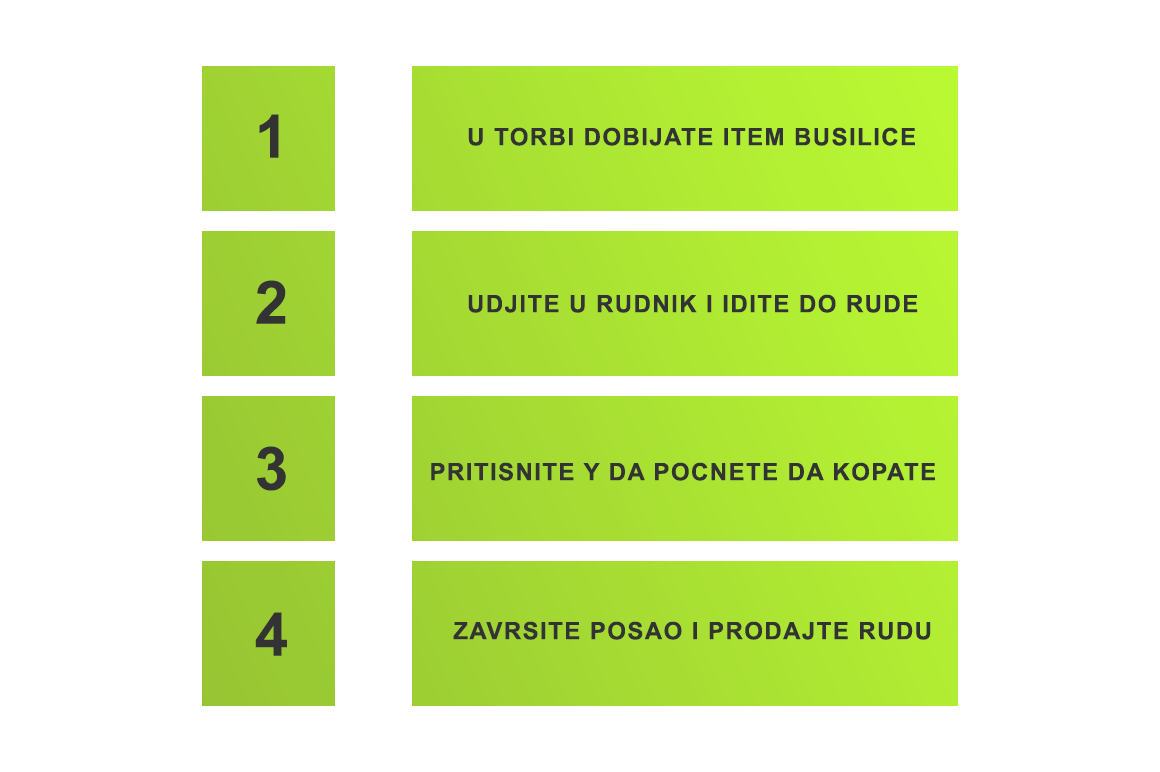
<style>
.page{position:relative;width:1160px;height:772px;background:#ffffff}
.page>*{position:absolute;margin:0}
.t1{font:60px "Arial-BoldMT";letter-spacing:0.06em;color:#333333;text-transform:uppercase}
.t2{font:24px "Arial-BoldMT";letter-spacing:0.06em;color:#333333;text-transform:uppercase}
</style>
<div class="page">
<p class="t1" style="left:259px;top:114px;width:20px;height:44px">1</p>
<p class="t2" style="left:468px;top:127px;width:447px;height:19px">U TORBI DOBIJATE ITEM BUSILICE</p>
<p class="t1" style="left:256px;top:280px;width:30px;height:44px">2</p>
<p class="t2" style="left:468px;top:294px;width:450px;height:19px">UDJITE U RUDNIK I IDITE DO RUDE</p>
<p class="t1" style="left:257px;top:446px;width:29px;height:45px">3</p>
<p class="t2" style="left:431px;top:462px;width:504px;height:19px">PRITISNITE Y DA POCNETE DA KOPATE</p>
<p class="t1" style="left:255px;top:612px;width:32px;height:44px">4</p>
<p class="t2" style="left:453px;top:621px;width:478px;height:19px">ZAVRSITE POSAO I PRODAJTE RUDU</p>
</div>
